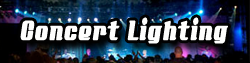
<style>
.page{position:relative;width:250px;height:63px}
.page>*{position:absolute;margin:0}
.t1{font:37.5px "AddCityboyNormal";letter-spacing:0.05em;color:#fefefd;font-weight:bold;scale:0.54 1}
</style>
<div class="page">
<p class="t1" style="left:20px;top:17px;width:208px;height:27px">Concert Lighting</p>
</div>
